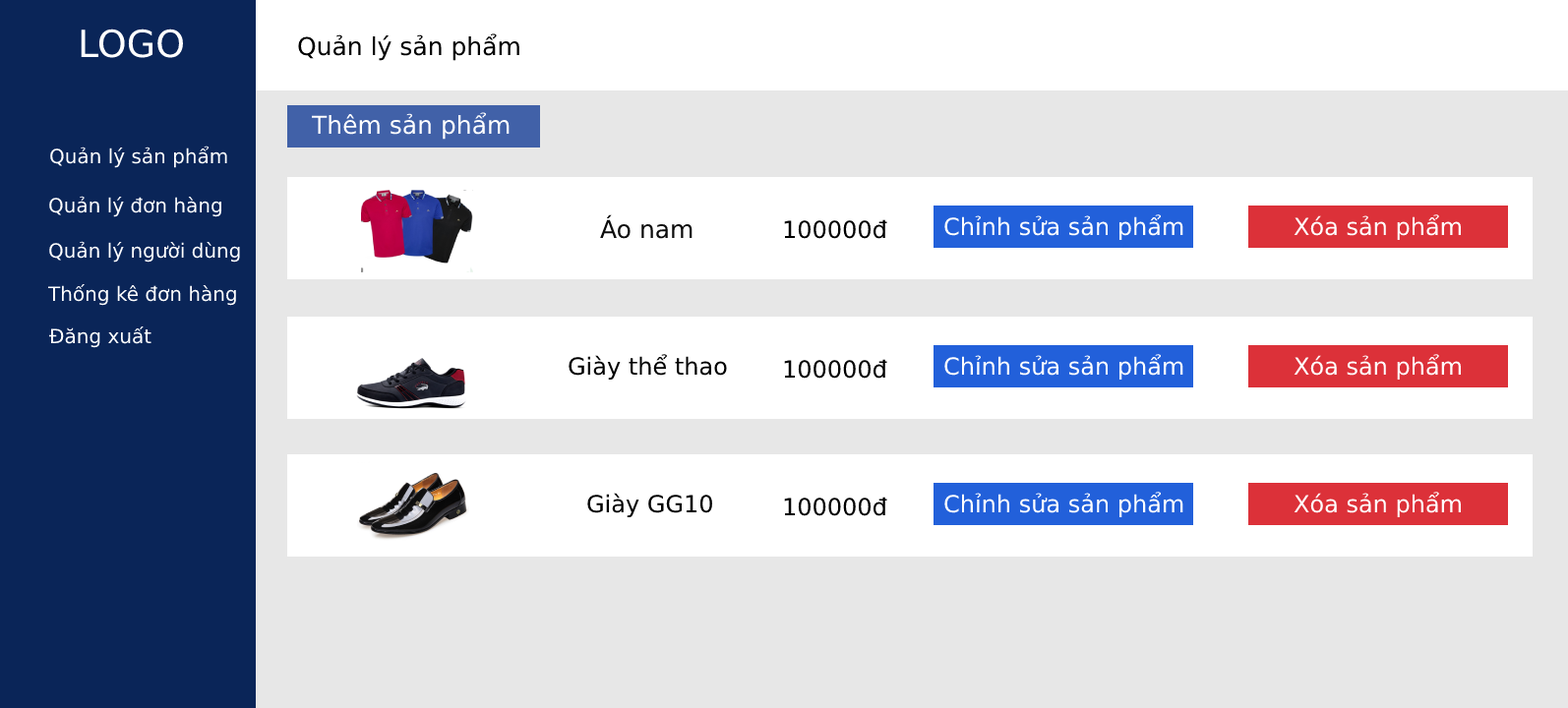
<style>
.page{position:relative;width:1568px;height:708px;background:#ffffff}
.page>*{position:absolute;margin:0}
.t1{font:37.4px "DejaVuSans";color:#ffffff}
.t2{font:24.6px "DejaVuSans";color:#000000}
.t3{font:24.6px "DejaVuSans";color:#ffffff}
.t4{font:19.7px "DejaVuSans";color:#ffffff}
.t5{font:23.6px "DejaVuSans";color:#000000}
.t6{font:23.6px "DejaVuSans";color:#ffffff}
</style>
<div class="page">
<p class="t1" style="left:81px;top:29px;width:102px;height:29px">LOGO</p>
<p class="t2" style="left:298px;top:33px;width:221px;height:28px">Quản lý sản phẩm</p>
<p class="t3" style="left:311px;top:112px;width:199px;height:28px">Thêm sản phẩm</p>
<p class="t4" style="left:50px;top:146px;width:177px;height:22px">Quản lý sản phẩm</p>
<p class="t4" style="left:49px;top:196px;width:172px;height:21px">Quản lý đơn hàng</p>
<p class="t5" style="left:784px;top:219px;width:103px;height:20px">100000đ</p>
<p class="t6" style="left:944px;top:214px;width:239px;height:26px">Chỉnh sửa sản phẩm</p>
<p class="t6" style="left:1294px;top:214px;width:168px;height:26px">Xóa sản phẩm</p>
<p class="t4" style="left:49px;top:241px;width:191px;height:22px">Quản lý người dùng</p>
<p class="t4" style="left:47px;top:284px;width:189px;height:22px">Thống kê đơn hàng</p>
<p class="t4" style="left:49px;top:327px;width:102px;height:21px">Đăng xuất</p>
<p class="t5" style="left:569px;top:354px;width:158px;height:26px">Giày thể thao</p>
<p class="t5" style="left:784px;top:359px;width:103px;height:20px">100000đ</p>
<p class="t6" style="left:944px;top:354px;width:239px;height:26px">Chỉnh sửa sản phẩm</p>
<p class="t6" style="left:1294px;top:354px;width:168px;height:26px">Xóa sản phẩm</p>
<p class="t5" style="left:587px;top:493px;width:125px;height:24px">Giày GG10</p>
<p class="t5" style="left:784px;top:497px;width:103px;height:19px">100000đ</p>
<p class="t6" style="left:944px;top:492px;width:239px;height:25px">Chỉnh sửa sản phẩm</p>
<p class="t6" style="left:1294px;top:492px;width:168px;height:25px">Xóa sản phẩm</p>
</div>
